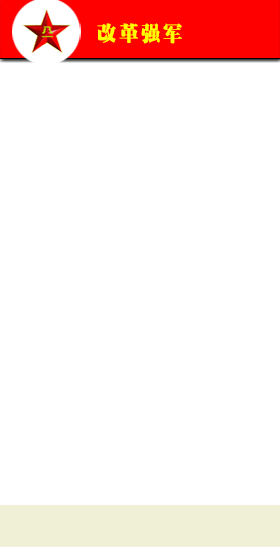
<style>
.page{position:relative;width:280px;height:547px;background:#ffffff}
.page>*{position:absolute;margin:0}
.t1{font:22.2px "RS_CuBiao";letter-spacing:0.05em;color:#ffff00;scale:0.94 1}
</style>
<div class="page">
<p class="t1" style="left:97px;top:23px;width:85px;height:21px">改革强军</p>
</div>
